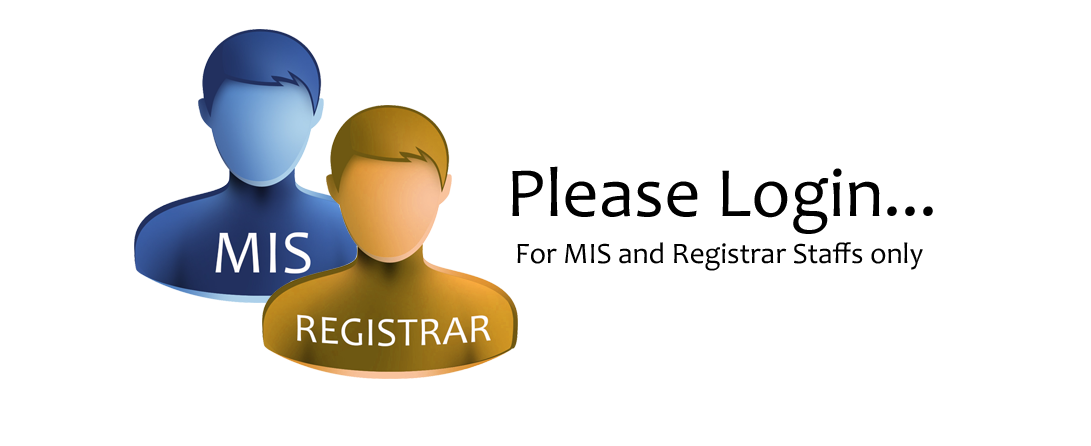
<style>
.page{position:relative;width:1091px;height:446px;background:#ffffff}
.page>*{position:absolute;margin:0}
.t1{font:71.3px "Candara";color:#000000}
.t2{font:29.7px "Candara";color:#000000}
</style>
<div class="page">
<p class="t1" style="left:512px;top:166px;width:421px;height:68px">Please Login...</p>
<p class="t2" style="left:517px;top:242px;width:406px;height:29px">For MIS and Registrar Staffs only</p>
</div>
